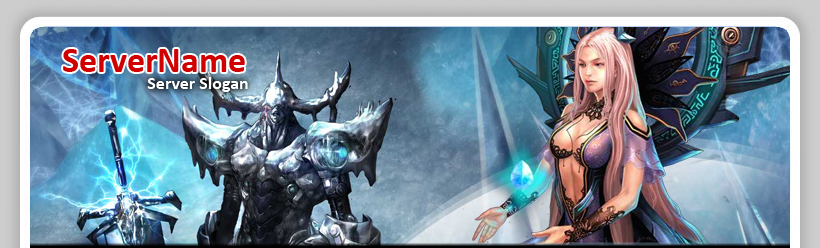
<style>
.page{position:relative;width:820px;height:248px}
.page>*{position:absolute;margin:0}
.t1{font:36px "Calibri-Bold";color:#d00000}
.t2{font:18px "Calibri-Bold";color:#ffffff}
</style>
<div class="page">
<p class="t1" style="left:63px;top:49px;width:182px;height:23px">ServerName</p>
<p class="t2" style="left:147px;top:77px;width:101px;height:15px">Server Slogan</p>
</div>
